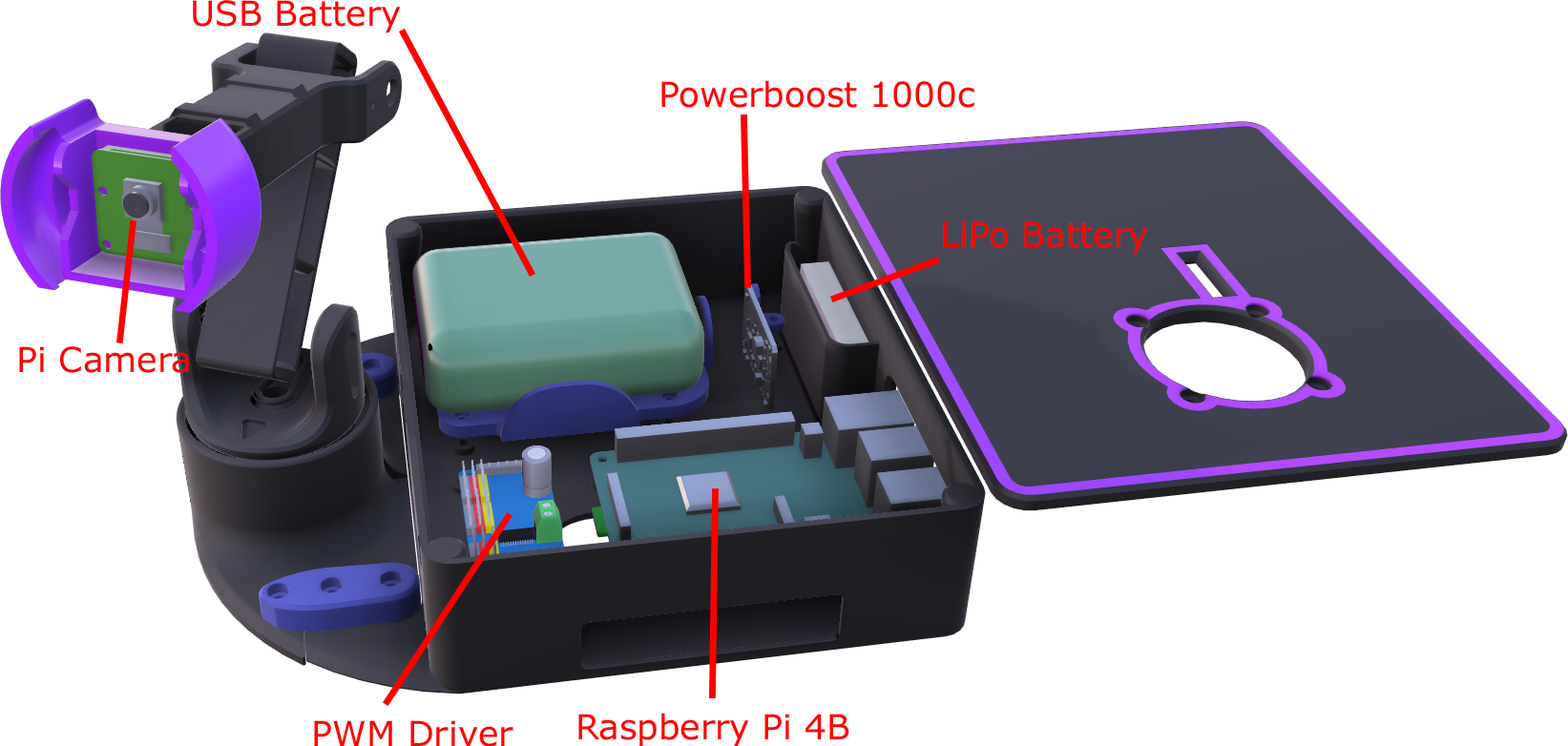
<style>
.page{position:relative;width:1568px;height:746px;background:#ffffff}
.page>*{position:absolute;margin:0}
.t1{font:34.4px "Verdana";color:#ff0000}
</style>
<div class="page">
<p class="t1" style="left:193px;top:0px;width:208px;height:33px">USB Battery</p>
<p class="t1" style="left:661px;top:80px;width:313px;height:28px">Powerboost 1000c</p>
<p class="t1" style="left:943px;top:221px;width:205px;height:34px">LiPo Battery</p>
<p class="t1" style="left:19px;top:346px;width:170px;height:27px">Pi Camera</p>
<p class="t1" style="left:578px;top:713px;width:271px;height:34px">Raspberry Pi 4B</p>
<p class="t1" style="left:314px;top:721px;width:199px;height:26px">PWM Driver</p>
</div>
